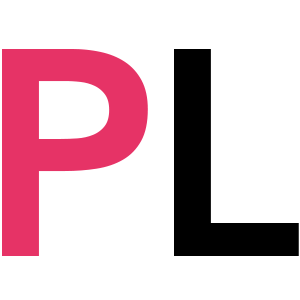
<style>
.page{position:relative;width:300px;height:300px;background:#ffffff}
.page>*{position:absolute;margin:0}
.t1{font:291.7px "Avenir-Heavy";color:#e63366}
.t2{font:291.7px "Avenir-Heavy";color:#000000}
</style>
<div class="page">
<p class="t1" style="left:2px;top:49px;width:146px;height:207px">P</p>
<p class="t2" style="left:174px;top:49px;width:125px;height:207px">L</p>
</div>
